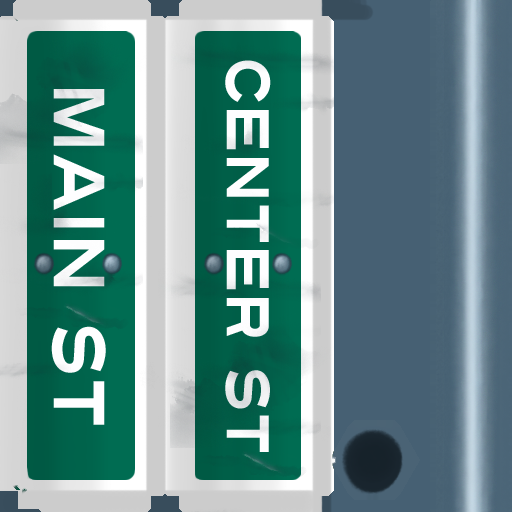
<style>
.page{position:relative;width:512px;height:512px}
.page>*{position:absolute;margin:0}
.t1{font:60px "Turnpike";color:#fefeff;scale:0.75 1}
.t2{font:72px "Turnpike";color:#fefeff;scale:0.75 1}
</style>
<div class="page">
<p class="t1" style="left:225px;top:60px;width:46px;height:392px;rotate:90deg">CENTER ST</p>
<p class="t2" style="left:51px;top:89px;width:55px;height:336px;rotate:90deg">MAIN ST</p>
</div>
